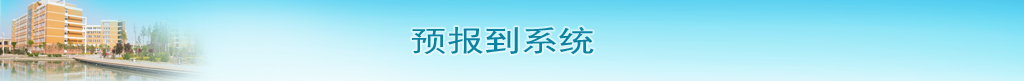
<style>
.page{position:relative;width:1024px;height:81px}
.page>*{position:absolute;margin:0}
.t1{font:29.3px "SimHei";color:#0e82a1;scale:1.26 1}
</style>
<div class="page">
<p class="t1" style="left:412px;top:27px;width:182px;height:28px">预报到系统</p>
</div>
